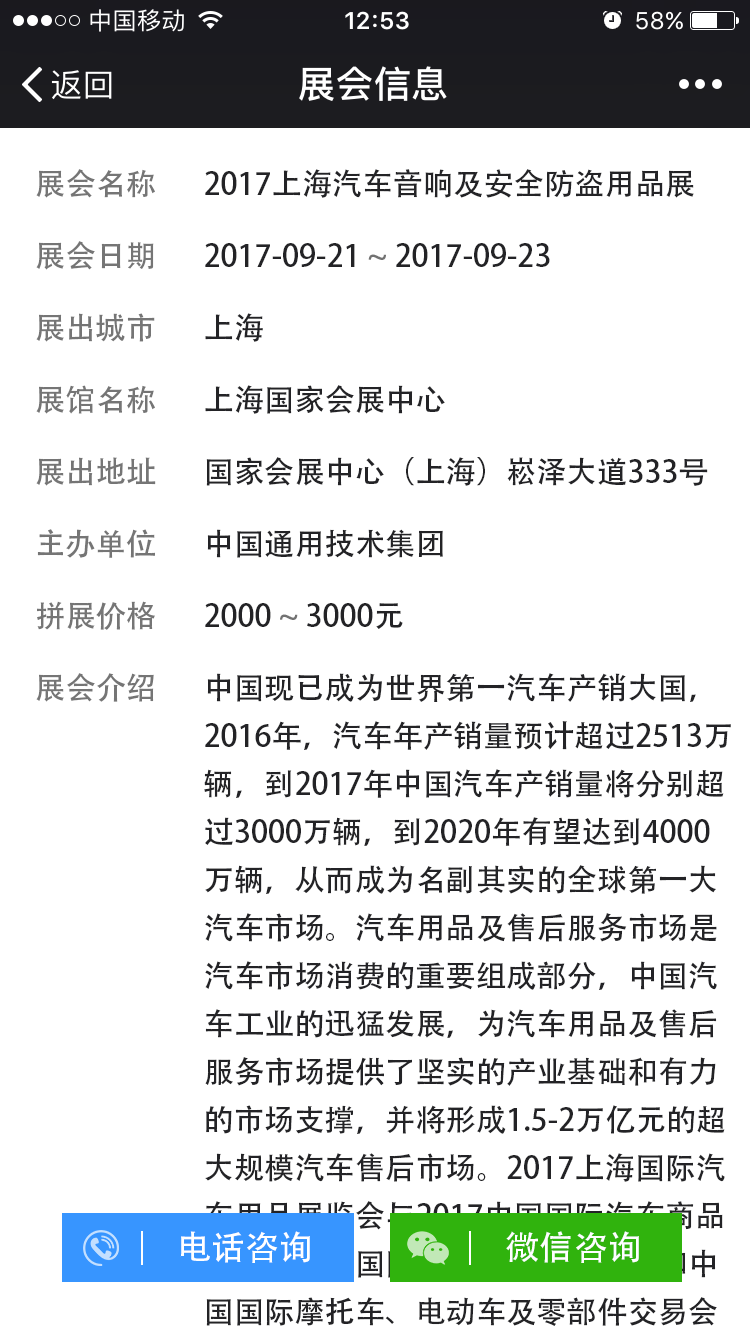
<style>
.page{position:relative;width:750px;height:1334px;background:#ffffff}
.page>*{position:absolute;margin:0}
.t1{font:30.3px/72px "AdobeHeitiStd-Regular";color:#757575}
.t2{font:30.3px/72px "AdobeHeitiStd-Regular";color:#232326}
.t3{font:30.3px/72px "AdobeHeitiStd-Regular";color:#727272}
.t4{font:30.3px/48px "AdobeHeitiStd-Regular";color:#232326}
.t5{font:33.9px "AdobeHeitiStd-Regular";color:#fefeff}
</style>
<div class="page">
<p class="t1" style="left:36px;top:169px;width:120px;height:533px">展会名称<br>展会日期<br>展出城市<br>展馆名称<br>展出地址<br>主办单位<br>拼展价格<br>展会介绍</p>
<p class="t2" style="left:205px;top:169px;width:503px;height:460px">2017上海汽车音响及安全防盗用品展<br>2017-09-21 <span class="t3">~</span> 2017-09-23<br>上海<br>上海国家会展中心<br>国家会展中心（上海）崧泽大道333号<br>中国通用技术集团<br>2000 <span class="t3">~</span> 3000元</p>
<p class="t4" style="left:204px;top:673px;width:527px;height:653px">中国现已成为世界第一汽车产销大国，2016年，汽车年产销量预计超过2513万辆，到2017年中国汽车产销量将分别超过3000万辆，到2020年有望达到4000万辆，从而成为名副其实的全球第一大汽车市场。汽车用品及售后服务市场是汽车市场消费的重要组成部分，中国汽车工业的迅猛发展，为汽车用品及售后服务市场提供了坚实的产业基础和有力的市场支撑，并将形成1.5-2万亿元的超大规模汽车售后市场。2017上海国际汽车用品展览会与2017中国国际汽车商品交易会、中国国际汽车改装博览会和中国国际摩托车、电动车及零部件交易会将同期举办，展会于9月25-27日在上海虹桥国家会展中心举办，展出面积25万平方米，其中2017上海国际汽车用品展览会为20000平方米，预计观众总数达30万人。</p>
<p class="t5" style="left:180px;top:1231px;width:130px;height:32px">电话咨询</p>
<p class="t5" style="left:506px;top:1231px;width:133px;height:32px">微信咨询</p>
</div>
